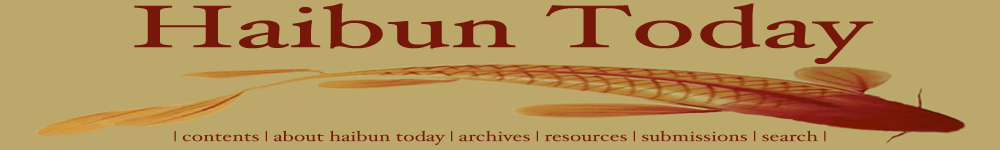
<style>
.page{position:relative;width:1000px;height:150px;background:#bba86a}
.page>*{position:absolute;margin:0}
.t1{font:60px "HoeflerText-Regular";color:#761809;scale:2 1}
.t2{font:14px "HoeflerText-Regular";color:#761809;scale:1.5 1}
</style>
<div class="page">
<p class="t1" style="left:134px;top:3px;width:740px;height:61px">Haibun Today</p>
<p class="t2" style="left:174px;top:130px;width:652px;height:15px">| contents | about haibun today | archives | resources | submissions | search |</p>
</div>
